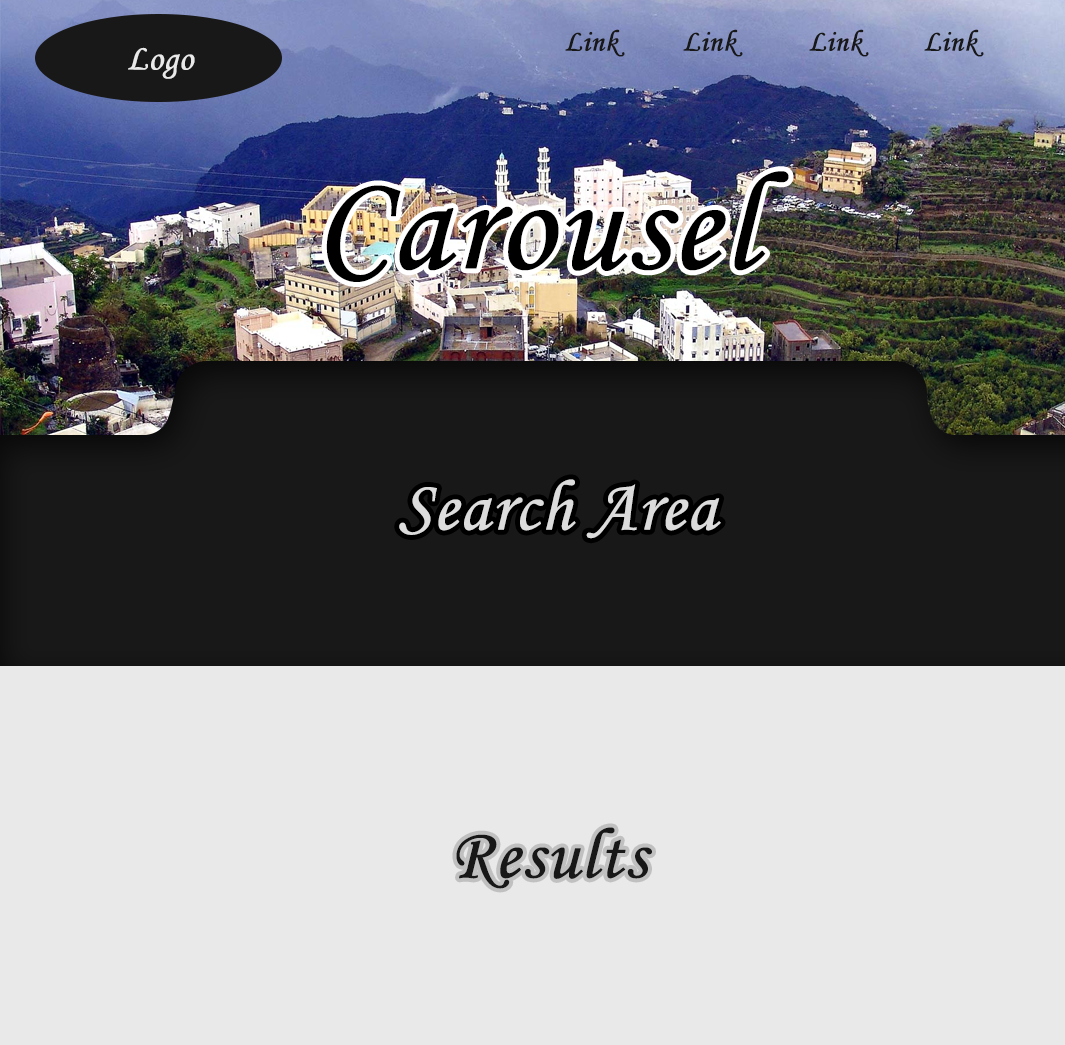
<style>
.page{position:relative;width:1065px;height:1045px;background:#e9e9e9}
.page>*{position:absolute;margin:0}
.t1{font:30px "MonotypeCorsiva";letter-spacing:-0.005em;color:#181818;font-weight:bold}
.t2{font:36px "MonotypeCorsiva";letter-spacing:-0.005em;color:#e9e9e9;font-weight:bold}
.t3{font:140px "MonotypeCorsiva";letter-spacing:-0.005em;color:#000000;font-weight:bold}
.t4{font:72px "MonotypeCorsiva";letter-spacing:-0.005em;color:#dcdcdc;font-weight:bold}
.t5{font:72px "MonotypeCorsiva";letter-spacing:-0.005em;color:#181818;font-weight:bold}
</style>
<div class="page">
<p class="t1" style="left:565px;top:29px;width:60px;height:28px">Link</p>
<p class="t1" style="left:683px;top:29px;width:60px;height:28px">Link</p>
<p class="t1" style="left:809px;top:29px;width:60px;height:28px">Link</p>
<p class="t1" style="left:924px;top:29px;width:60px;height:28px">Link</p>
<p class="t2" style="left:128px;top:47px;width:67px;height:32px">Logo</p>
<p class="t3" style="left:326px;top:171px;width:463px;height:111px">Carousel</p>
<p class="t4" style="left:399px;top:479px;width:322px;height:60px">Search Area</p>
<p class="t5" style="left:456px;top:827px;width:196px;height:62px">Results</p>
</div>
